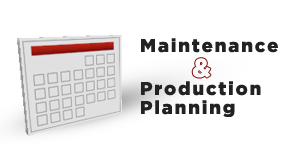
<style>
.page{position:relative;width:300px;height:161px;background:#ffffff}
.page>*{position:absolute;margin:0}
.t1{font:18.5px/17px "GothamBlack";letter-spacing:0.1em;color:#222222}
.t2{font:18.5px/43px "GothamBlack";letter-spacing:0.1em;color:#222222}
.t3{font:18.5px/19px "GothamBlack";letter-spacing:0.1em;color:#222222}
.t4{font:26.5px "GothamBlack";letter-spacing:0.1em;color:#fafafa}
</style>
<div class="page">
<p class="t1" style="left:141px;top:38px;width:137px;height:79px">Maintenance<br><span class="t2">Production<br></span><span class="t3">Planning</span></p>
<p class="t4" style="left:192px;top:58px;width:19px;height:20px">&amp;</p>
</div>
